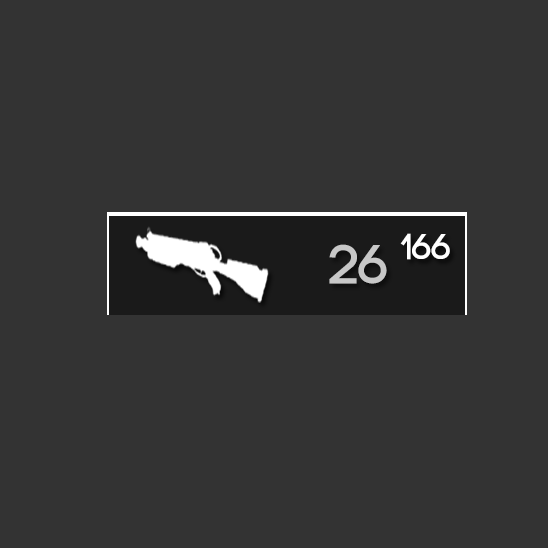
<style>
.page{position:relative;width:548px;height:548px;background:#333333}
.page>*{position:absolute;margin:0}
.t1{font:36px "Code-Bold";color:#ffffff}
.t2{font:55px "Code-Bold";color:#c7c7c7}
</style>
<div class="page">
<p class="t1" style="left:400px;top:233px;width:50px;height:27px">166</p>
<p class="t2" style="left:329px;top:244px;width:58px;height:40px">26</p>
</div>
